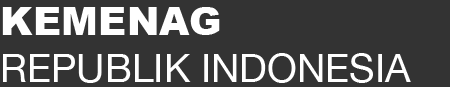
<style>
.page{position:relative;width:450px;height:87px;background:#333333}
.page>*{position:absolute;margin:0}
.t1{font:39.3px "HelveticaNeue";color:#ffffff}
.t2{font:39.3px "Arial-Black";color:#ffffff}
</style>
<div class="page">
<p class="t1" style="left:2px;top:7px;width:409px;height:76px"><span class="t2">KEMENAG<br></span>REPUBLIK INDONESIA</p>
</div>
